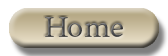
<style>
.page{position:relative;width:168px;height:56px;background:#ffffff}
.page>*{position:absolute;margin:0}
.t1{font:32px "AdobeDevanagari-Regular";color:#494a4d;scale:1.09 1}
</style>
<div class="page">
<p class="t1" style="left:45px;top:17px;width:78px;height:20px">Home</p>
</div>
